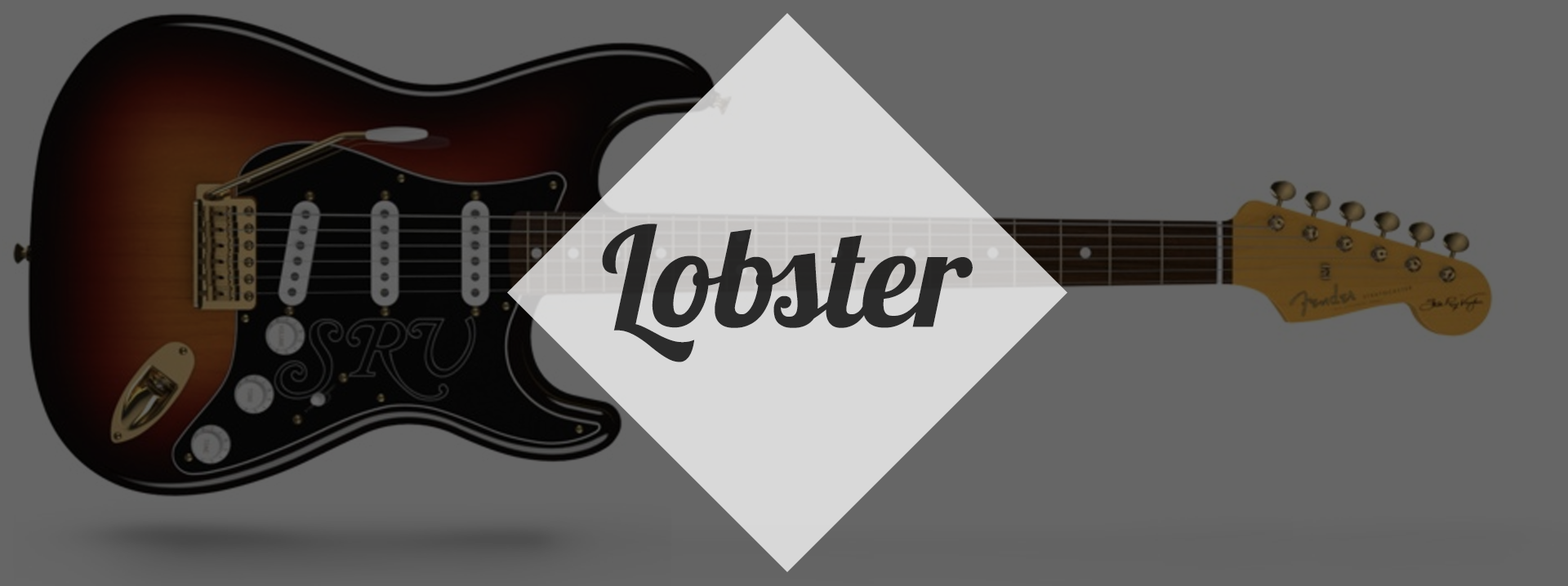
<style>
.page{position:relative;width:1568px;height:586px;background:#666666}
.page>*{position:absolute;margin:0}
.t1{font:139.5px "Lobster-Regular";color:#282828}
</style>
<div class="page">
<p class="t1" style="left:602px;top:224px;width:371px;height:139px">Lobster</p>
</div>
